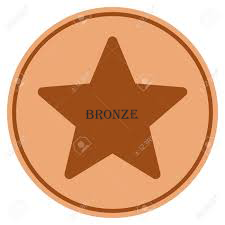
<style>
.page{position:relative;width:225px;height:225px}
.page>*{position:absolute;margin:0}
.t1{font:14px "Algerian";color:#282828}
</style>
<div class="page">
<p class="t1" style="left:85px;top:109px;width:54px;height:11px">Bronze</p>
</div>
